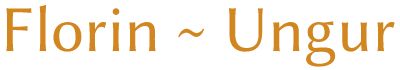
<style>
.page{position:relative;width:400px;height:70px;background:#ffffff}
.page>*{position:absolute;margin:0}
.t1{font:66px "LibertinusSans-Regular";color:#d1861f}
</style>
<div class="page">
<p class="t1" style="left:6px;top:4px;width:389px;height:63px">Florin ~ Ungur</p>
</div>
